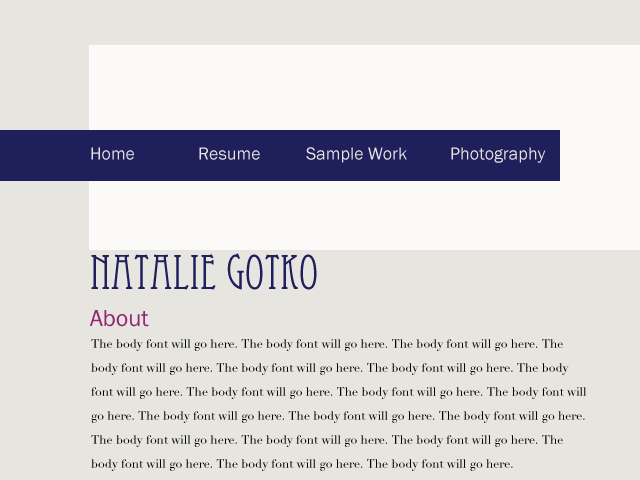
<style>
.page{position:relative;width:640px;height:480px;background:#e6e5e0}
.page>*{position:absolute;margin:0}
.t1{font:18px "FranklinGothic-Book";color:#e6e4e0}
.t2{font:48px "EccentricStd";color:#1f1f5c}
.t3{font:24px "FranklinGothic-Book";color:#932573}
.t4{font:12px/24px "Didot";color:#000000}
</style>
<div class="page">
<p class="t1" style="left:91px;top:147px;width:455px;height:16px">Home  Resume  Sample Work  Photography</p>
<p class="t2" style="left:91px;top:253px;width:226px;height:37px">Natalie Gotko</p>
<p class="t3" style="left:90px;top:310px;width:59px;height:17px">About</p>
<p class="t4" style="left:91px;top:339px;width:496px;height:132px">The body font will go here. The body font will go here. The body font will go here. The body font will go here. The body font will go here. The body font will go here. The body font will go here. The body font will go here. The body font will go here. The body font will go here. The body font will go here. The body font will go here. The body font will go here. The body font will go here. The body font will go here. The body font will go here. The body font will go here. The body font will go here. The body font will go here.</p>
</div>
